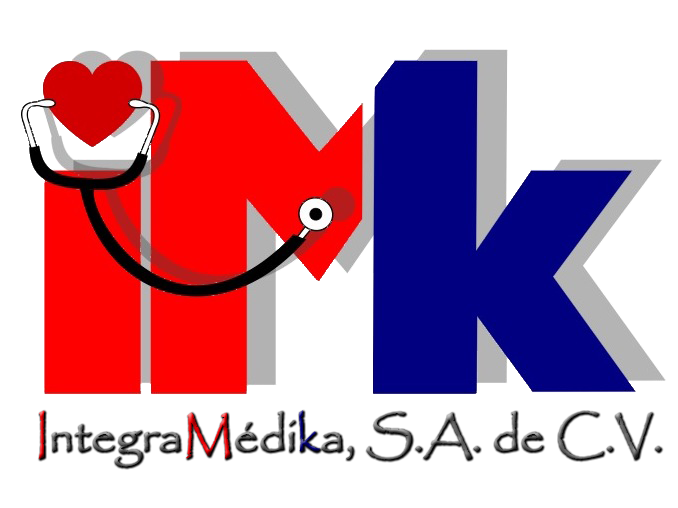
<style>
.page{position:relative;width:678px;height:508px;background:#ffffff}
.page>*{position:absolute;margin:0}
.t1{font:49px "Papyrus-Regular"}
</style>
<div class="page">
<p class="t1" style="left:38px;top:410px;width:623px;height:57px">IntegraMédika, S.A. de C.V.</p>
</div>
